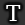
<style>
.page{position:relative;width:25px;height:25px;background:#333333}
.page>*{position:absolute;margin:0}
.t1{font:24px "Sylfaen";color:#ffffff}
</style>
<div class="page">
<p class="t1" style="left:6px;top:5px;width:15px;height:16px">T</p>
</div>
